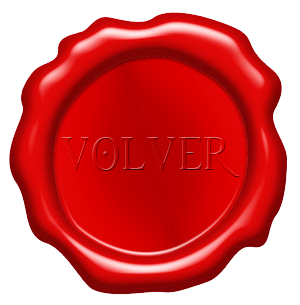
<style>
.page{position:relative;width:300px;height:305px;background:#ffffff}
.page>*{position:absolute;margin:0}
.t1{font:43.3px "Morpheus"}
</style>
<div class="page">
<p class="t1" style="left:60px;top:137px;width:182px;height:40px">VOLVER</p>
</div>
